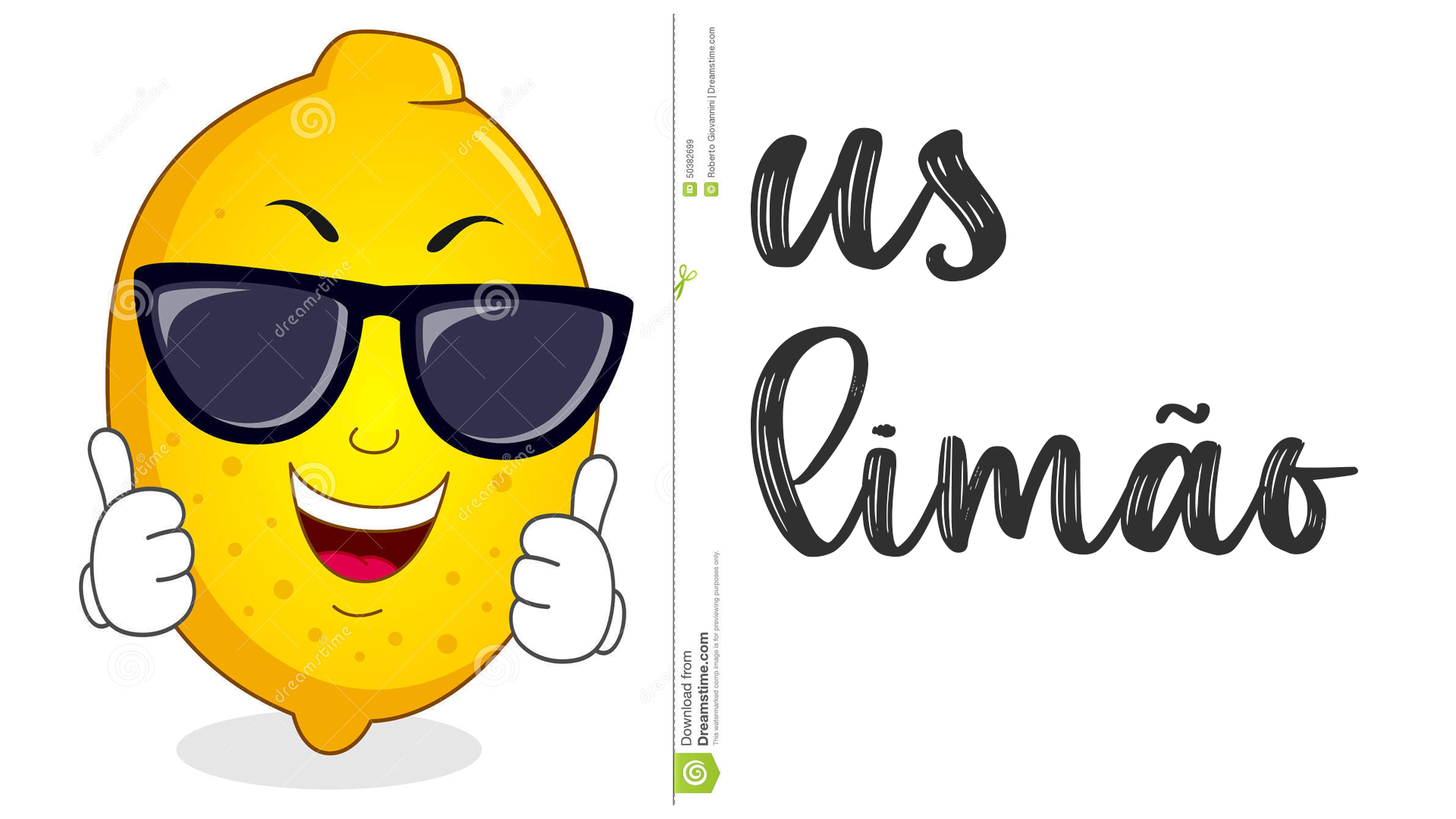
<style>
.page{position:relative;width:1456px;height:819px;background:#ffffff}
.page>*{position:absolute;margin:0}
.t1{font:316.4px "AestheticViolet";color:#303030}
.t2{font:242.7px "AestheticViolet";color:#303030}
</style>
<div class="page">
<p class="t1" style="left:750px;top:127px;width:256px;height:155px">us</p>
<p class="t2" style="left:750px;top:326px;width:608px;height:231px">limão</p>
</div>
